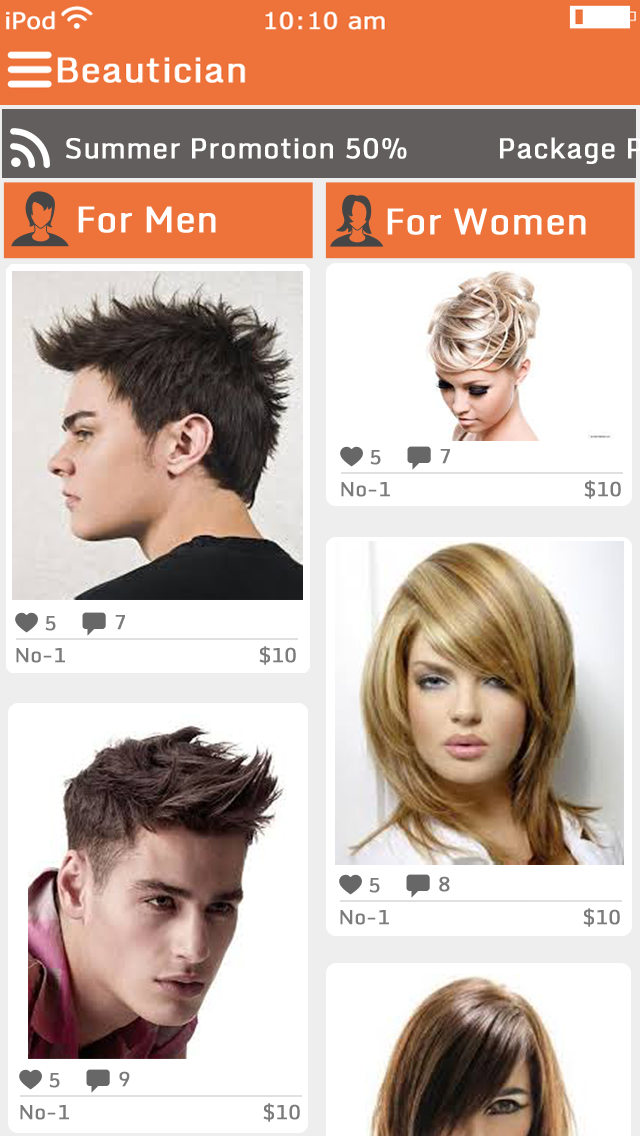
<style>
.page{position:relative;width:640px;height:1136px;background:#ffffff}
.page>*{position:absolute;margin:0}
.t1{font:36px "Monda-Regular";color:#ffffff;font-weight:bold}
.t2{font:20px "Monda-Regular";color:#7b7b7b;font-weight:bold}
</style>
<div class="page">
<p class="t1" style="left:78px;top:206px;width:138px;height:27px">For Men</p>
<p class="t1" style="left:387px;top:208px;width:199px;height:27px">For Women</p>
<p class="t2" style="left:440px;top:449px;width:10px;height:15px">7</p>
<p class="t2" style="left:370px;top:450px;width:11px;height:15px">5</p>
<p class="t2" style="left:341px;top:480px;width:280px;height:19px">No-1                                $10</p>
<p class="t2" style="left:45px;top:616px;width:11px;height:15px">5</p>
<p class="t2" style="left:115px;top:615px;width:10px;height:15px">7</p>
<p class="t2" style="left:16px;top:646px;width:280px;height:19px">No-1                                $10</p>
<p class="t2" style="left:369px;top:878px;width:11px;height:15px">5</p>
<p class="t2" style="left:439px;top:876px;width:11px;height:16px">8</p>
<p class="t2" style="left:340px;top:908px;width:280px;height:19px">No-1                                $10</p>
<p class="t2" style="left:49px;top:1073px;width:11px;height:15px">5</p>
<p class="t2" style="left:119px;top:1071px;width:11px;height:16px">9</p>
<p class="t2" style="left:20px;top:1103px;width:280px;height:19px">No-1                                $10</p>
</div>
